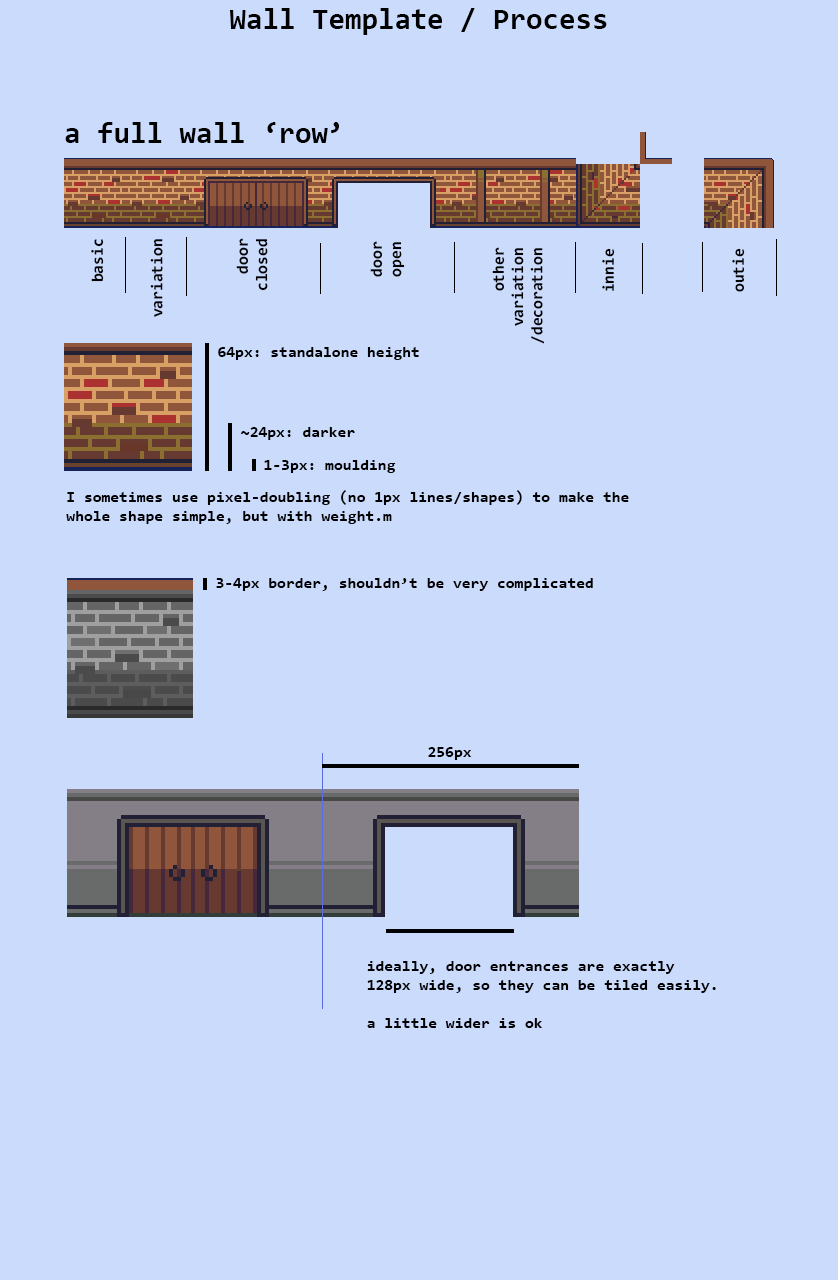
<style>
.page{position:relative;width:838px;height:1280px;background:#cbdbfc}
.page>*{position:absolute;margin:0}
.t1{font:30px "Consolas-Bold";color:#000000}
.t2{font:16px "Consolas-Bold";color:#000000}
</style>
<div class="page">
<p class="t1" style="left:230px;top:8px;width:377px;height:27px">Wall Template / Process</p>
<p class="t1" style="left:65px;top:122px;width:274px;height:21px">a full wall ‘row’</p>
<p class="t2" style="left:91px;top:239px;width:13px;height:43px;rotate:-90deg">basic</p>
<p class="t2" style="left:150px;top:239px;width:13px;height:78px;rotate:-90deg">variation</p>
<p class="t2" style="left:236px;top:238px;width:32px;height:53px;text-align:right;rotate:-90deg">door<br>closed</p>
<p class="t2" style="left:370px;top:241px;width:35px;height:36px;text-align:right;rotate:-90deg">door<br>open</p>
<p class="t2" style="left:492px;top:247px;width:53px;height:97px;text-align:right;rotate:-90deg">other<br>variation<br>/decoration</p>
<p class="t2" style="left:602px;top:248px;width:13px;height:43px;rotate:-90deg">innie</p>
<p class="t2" style="left:732px;top:248px;width:13px;height:44px;rotate:-90deg">outie</p>
<p class="t2" style="left:218px;top:347px;width:201px;height:13px">64px: standalone height</p>
<p class="t2" style="left:241px;top:427px;width:114px;height:13px">~24px: darker</p>
<p class="t2" style="left:264px;top:460px;width:132px;height:13px">1-3px: moulding</p>
<p class="t2" style="left:66px;top:490px;width:563px;height:34px">I sometimes use pixel-doubling (no 1px lines/shapes) to make the<br>whole shape simple, but with weight.m</p>
<p class="t2" style="left:216px;top:578px;width:377px;height:13px">3-4px border, shouldn’t be very complicated</p>
<p class="t2" style="left:428px;top:747px;width:44px;height:13px">256px</p>
<p class="t2" style="left:367px;top:961px;width:349px;height:67px">ideally, door entrances are exactly<br>128px wide, so they can be tiled easily.<br><br>a little wider is ok</p>
</div>
